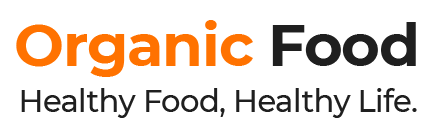
<style>
.page{position:relative;width:440px;height:138px;background:#ffffff}
.page>*{position:absolute;margin:0}
.t1{font:59.2px "Montserrat-Bold";letter-spacing:-0.02em;color:#ff7200}
.t2{font:59.2px "Montserrat-Bold";letter-spacing:-0.02em;color:#1f1f1f}
.t3{font:30.7px "Montserrat-Medium";letter-spacing:-0.02em;color:#1f1f1f}
</style>
<div class="page">
<p class="t1" style="left:16px;top:20px;width:400px;height:57px">Organic<span class="t2"> Food</span></p>
<p class="t3" style="left:21px;top:88px;width:396px;height:30px">Healthy Food, Healthy Life.</p>
</div>
